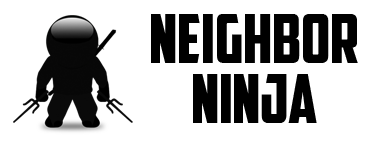
<style>
.page{position:relative;width:375px;height:150px;background:#ffffff}
.page>*{position:absolute;margin:0}
.t1{font:66.7px "AmericanCaptain";color:#000000}
</style>
<div class="page">
<p class="t1" style="left:151px;top:14px;width:207px;height:49px">neighbor</p>
<p class="t1" style="left:193px;top:74px;width:124px;height:49px">ninja</p>
</div>
